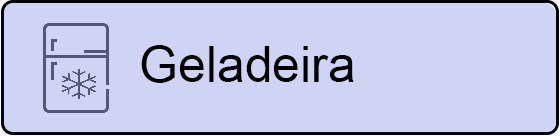
<style>
.page{position:relative;width:560px;height:136px;background:#cfd3f4}
.page>*{position:absolute;margin:0}
.t1{font:50px "ArialMT";color:#000000}
</style>
<div class="page">
<p class="t1" style="left:141px;top:45px;width:213px;height:38px">Geladeira</p>
</div>
